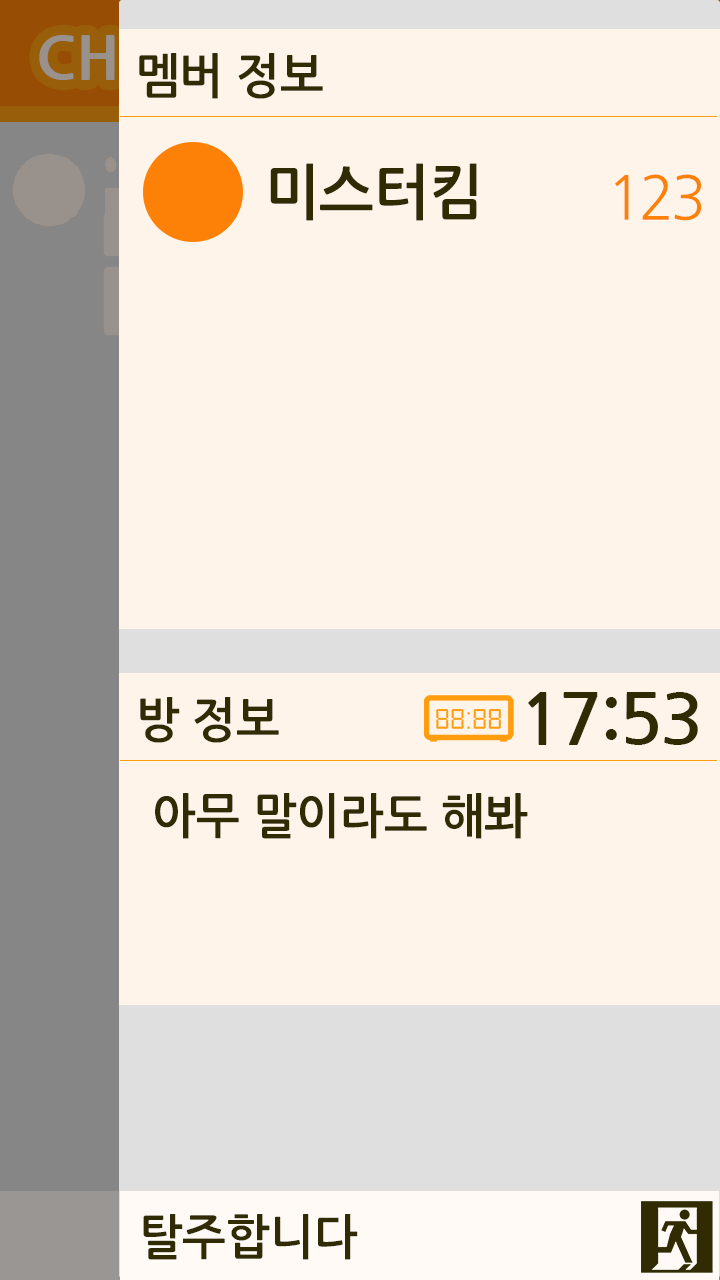
<style>
.page{position:relative;width:720px;height:1280px;background:#fff4ea}
.page>*{position:absolute;margin:0}
.t1{font:48px "NanumGothicBold";color:#302b02;scale:0.97 1}
.t2{font:60px "NanumGothicBold";color:#302b02;scale:0.97 1}
.t3{font:60px "NanumGothic";letter-spacing:-0.06em;color:#fd8107;scale:0.97 1}
.t4{font:72px "NanumGothicBold";letter-spacing:-0.04em;color:#302b02}
</style>
<div class="page">
<p class="t1" style="left:139px;top:53px;width:184px;height:46px">멤버 정보</p>
<p class="t2" style="left:270px;top:163px;width:207px;height:58px">미스터킴</p>
<p class="t3" style="left:615px;top:174px;width:87px;height:47px">123</p>
<p class="t1" style="left:140px;top:697px;width:139px;height:46px">방 정보</p>
<p class="t4" style="left:528px;top:692px;width:170px;height:53px">17:53</p>
<p class="t1" style="left:155px;top:793px;width:373px;height:46px">아무 말이라도 해봐</p>
<p class="t1" style="left:143px;top:1214px;width:215px;height:46px">탈주합니다</p>
</div>
